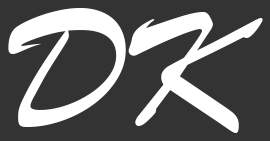
<style>
.page{position:relative;width:270px;height:141px;background:#333333}
.page>*{position:absolute;margin:0}
.t1{font:179.7px "BrushScriptMT";color:#ffffff}
</style>
<div class="page">
<p class="t1" style="left:8px;top:8px;width:255px;height:125px">DK</p>
</div>
